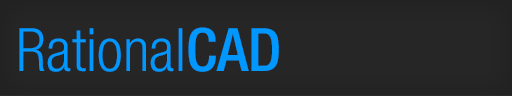
<style>
.page{position:relative;width:512px;height:96px;background:#262626}
.page>*{position:absolute;margin:0}
.t1{font:60px "HelveticaNeueLTStd-LtCn";color:#0097ff}
.t2{font:60px "HelveticaNeueLTStd-MdCn";color:#0097ff}
</style>
<div class="page">
<p class="t1" style="left:19px;top:27px;width:260px;height:45px">Rational<span class="t2">CAD</span></p>
</div>
